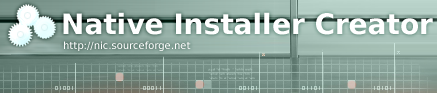
<style>
.page{position:relative;width:437px;height:93px}
.page>*{position:absolute;margin:0}
.t1{font:28px "BitstreamVeraSans-Bold";color:#ffffff}
.t2{font:10px "BitstreamVeraSans-Roman";color:#ffffff}
</style>
<div class="page">
<p class="t1" style="left:63px;top:12px;width:370px;height:23px">Native Installer Creator</p>
<p class="t2" style="left:64px;top:41px;width:127px;height:10px">http://nic.sourceforge.net</p>
</div>
